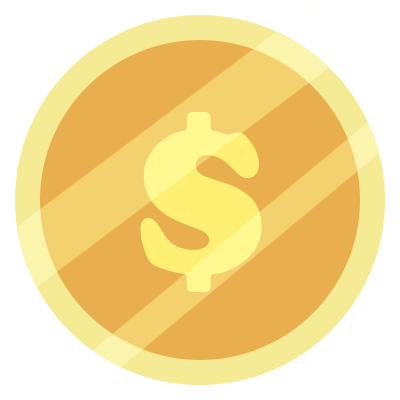
<style>
.page{position:relative;width:400px;height:400px;background:#ffffff}
.page>*{position:absolute;margin:0}
.t1{font:240.8px "CooperBlack";scale:0.94 1}
</style>
<div class="page">
<p class="t1" style="left:140px;top:112px;width:122px;height:180px">$</p>
</div>
